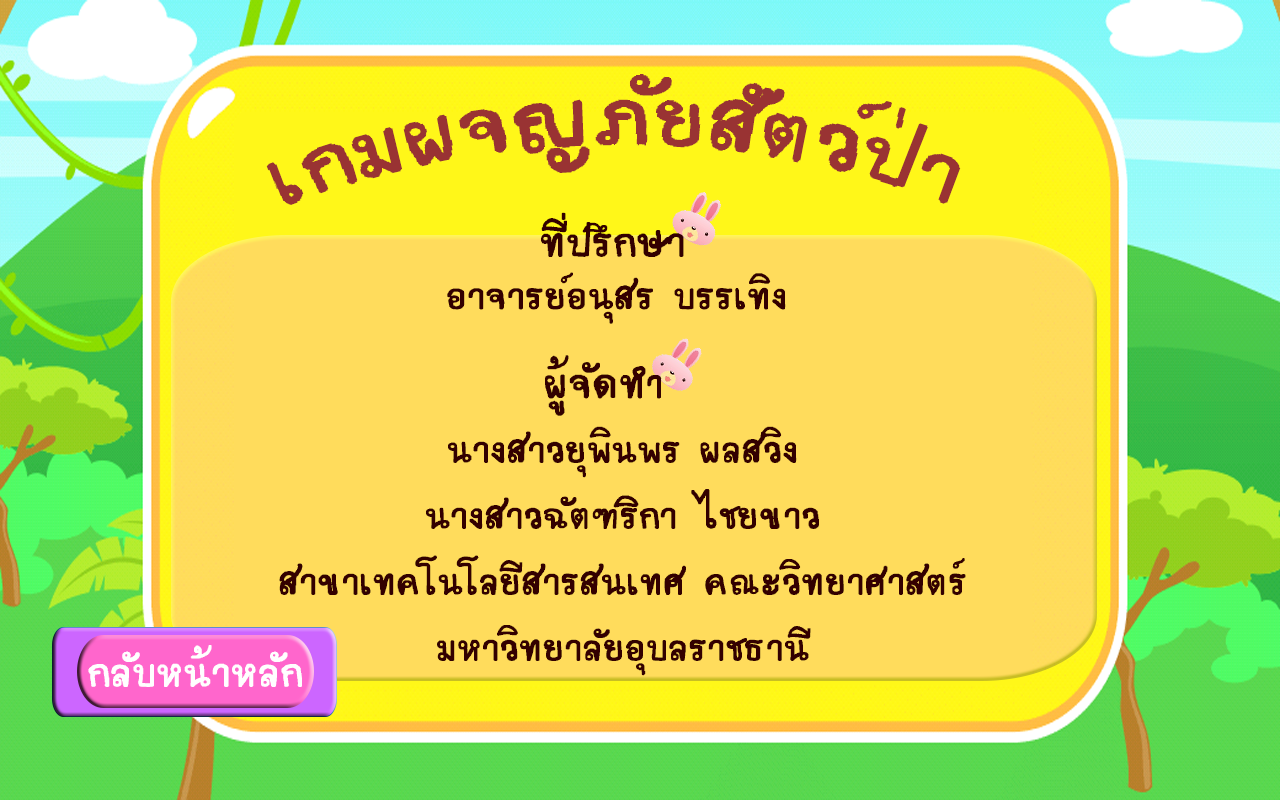
<style>
.page{position:relative;width:1280px;height:800px;background:#ffdc5c}
.page>*{position:absolute;margin:0}
.t1{font:120px "teddy";color:#993333}
.t2{font:60.9px "teddy";color:#330000}
.t3{font:55.1px "teddy";color:#330000}
.t4{font:61.5px "teddy";color:#330000}
.t5{font:55px "teddy";color:#330000}
</style>
<div class="page">
<p class="t1" style="left:266px;top:74px;width:695px;height:131px">เกมผจญภัยสัตว์ป่า</p>
<p class="t2" style="left:541px;top:212px;width:143px;height:45px">ที่ปรึกษา</p>
<p class="t3" style="left:447px;top:272px;width:339px;height:52px">อาจารย์อนุสร บรรเทิง</p>
<p class="t4" style="left:545px;top:355px;width:117px;height:61px">ผู้จัดทำ</p>
<p class="t5" style="left:279px;top:426px;width:687px;height:250px;text-align:center">นางสาวยุพินพร ผลสวิง<br>นางสาวฉัตฑริกา ไชยขาว<br>สาขาเทคโนโลยีสารสนเทศ คณะวิทยาศาสตร์<br>มหาวิทยาลัยอุบลราชธานี</p>
</div>
